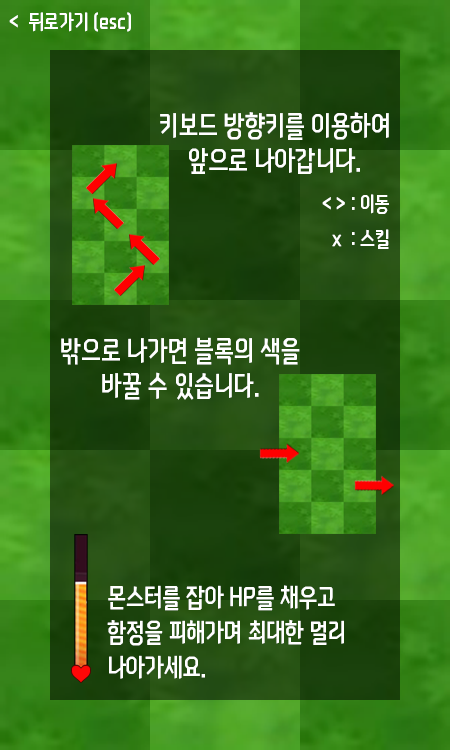
<style>
.page{position:relative;width:450px;height:750px}
.page>*{position:absolute;margin:0}
.t1{font:21.6px "NEXONFootballGothicL";color:#ffffff;scale:0.83 1}
.t2{font:28.8px/35px "NEXONFootballGothicL";color:#ffffff;scale:0.83 1}
.t3{font:21.6px/35px "NEXONFootballGothicL";color:#ffffff;scale:0.83 1}
.t4{font:26.4px/35px "NEXONFootballGothicL";color:#ffffff;scale:0.83 1}
</style>
<div class="page">
<p class="t1" style="left:9px;top:12px;width:122px;height:20px">&lt;  뒤로가기 (esc)</p>
<p class="t2" style="left:160px;top:112px;width:229px;height:62px;text-align:center">키보드 방향키를 이용하여<br>앞으로 나아갑니다.</p>
<p class="t3" style="left:322px;top:194px;width:67px;height:55px">&lt; &gt; : 이동<br>  x  : 스킬</p>
<p class="t2" style="left:61px;top:337px;width:239px;height:63px;text-align:center">밖으로 나가면 블록의 색을<br>바꿀 수 있습니다.</p>
<p class="t4" style="left:107px;top:585px;width:237px;height:94px">몬스터를 잡아 HP를 채우고<br>함정을 피해가며 최대한 멀리<br>나아가세요.</p>
</div>
